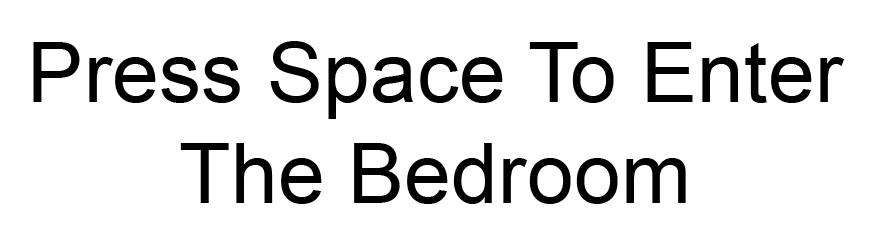
<style>
.page{position:relative;width:875px;height:250px;background:#ffffff}
.page>*{position:absolute;margin:0}
.t1{font:84.5px "ArialMT";color:#000000}
</style>
<div class="page">
<p class="t1" style="left:33px;top:41px;width:812px;height:163px;text-align:center">Press Space To Enter The Bedroom</p>
</div>
